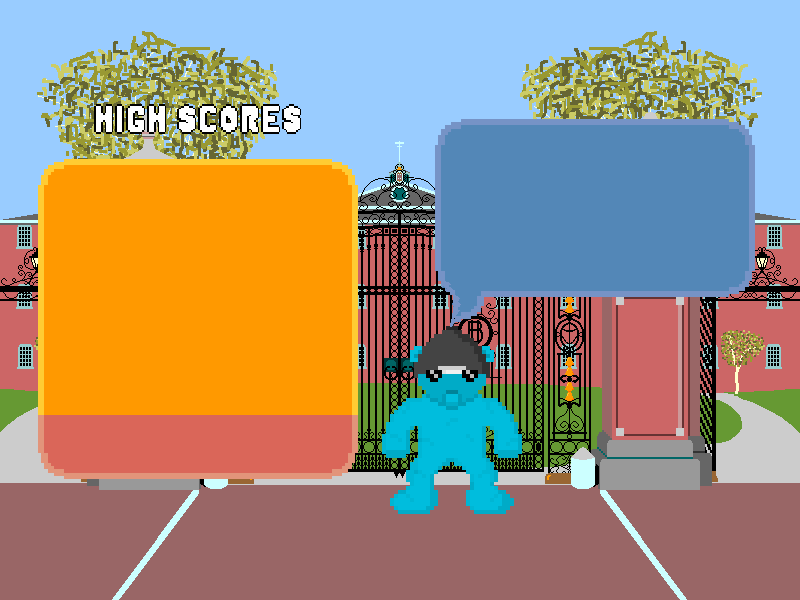
<style>
.page{position:relative;width:800px;height:600px}
.page>*{position:absolute;margin:0}
.t1{font:30px "Trash-Dash";color:#000000}
</style>
<div class="page">
<p class="t1" style="left:94px;top:104px;width:207px;height:30px">High Scores</p>
</div>
